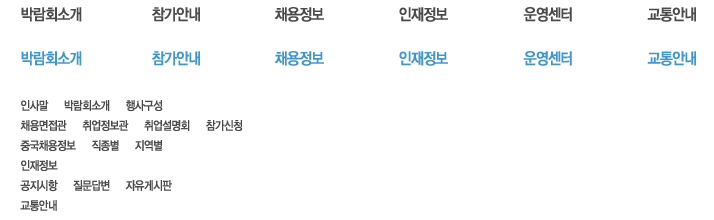
<style>
.page{position:relative;width:714px;height:220px;background:#ffffff}
.page>*{position:absolute;margin:0}
.t1{font:16px "YDIYGO130-KSCpc-EUC-H";letter-spacing:-0.14em;color:#4a4a4a;font-weight:bold;scale:0.86 1}
.t2{font:16px "YDIYGO130-KSCpc-EUC-H";letter-spacing:-0.14em;color:#3e95cf;font-weight:bold;scale:0.86 1}
.t3{font:12px/20px "YDIYGO130-KSCpc-EUC-H";letter-spacing:-0.14em;color:#4a4a4a;font-weight:bold;scale:0.86 1}
</style>
<div class="page">
<p class="t1" style="left:21px;top:7px;width:61px;height:15px">박람회소개</p>
<p class="t1" style="left:152px;top:7px;width:48px;height:15px">참가안내</p>
<p class="t1" style="left:274px;top:7px;width:50px;height:15px">채용정보</p>
<p class="t1" style="left:399px;top:7px;width:49px;height:15px">인재정보</p>
<p class="t1" style="left:523px;top:7px;width:49px;height:15px">운영센터</p>
<p class="t1" style="left:647px;top:7px;width:49px;height:15px">교통안내</p>
<p class="t2" style="left:21px;top:51px;width:61px;height:15px">박람회소개</p>
<p class="t2" style="left:152px;top:51px;width:48px;height:15px">참가안내</p>
<p class="t2" style="left:274px;top:51px;width:50px;height:15px">채용정보</p>
<p class="t2" style="left:399px;top:51px;width:49px;height:15px">인재정보</p>
<p class="t2" style="left:523px;top:51px;width:49px;height:15px">운영센터</p>
<p class="t2" style="left:647px;top:51px;width:49px;height:15px">교통안내</p>
<p class="t3" style="left:20px;top:100px;width:223px;height:111px">인사말    박람회소개    행사구성<br>채용면접관    취업정보관    취업설명회    참가신청<br>중국채용정보    직종별    지역별<br>인재정보<br>공지시항    질문답변    자유게시판<br>교통안내</p>
</div>
